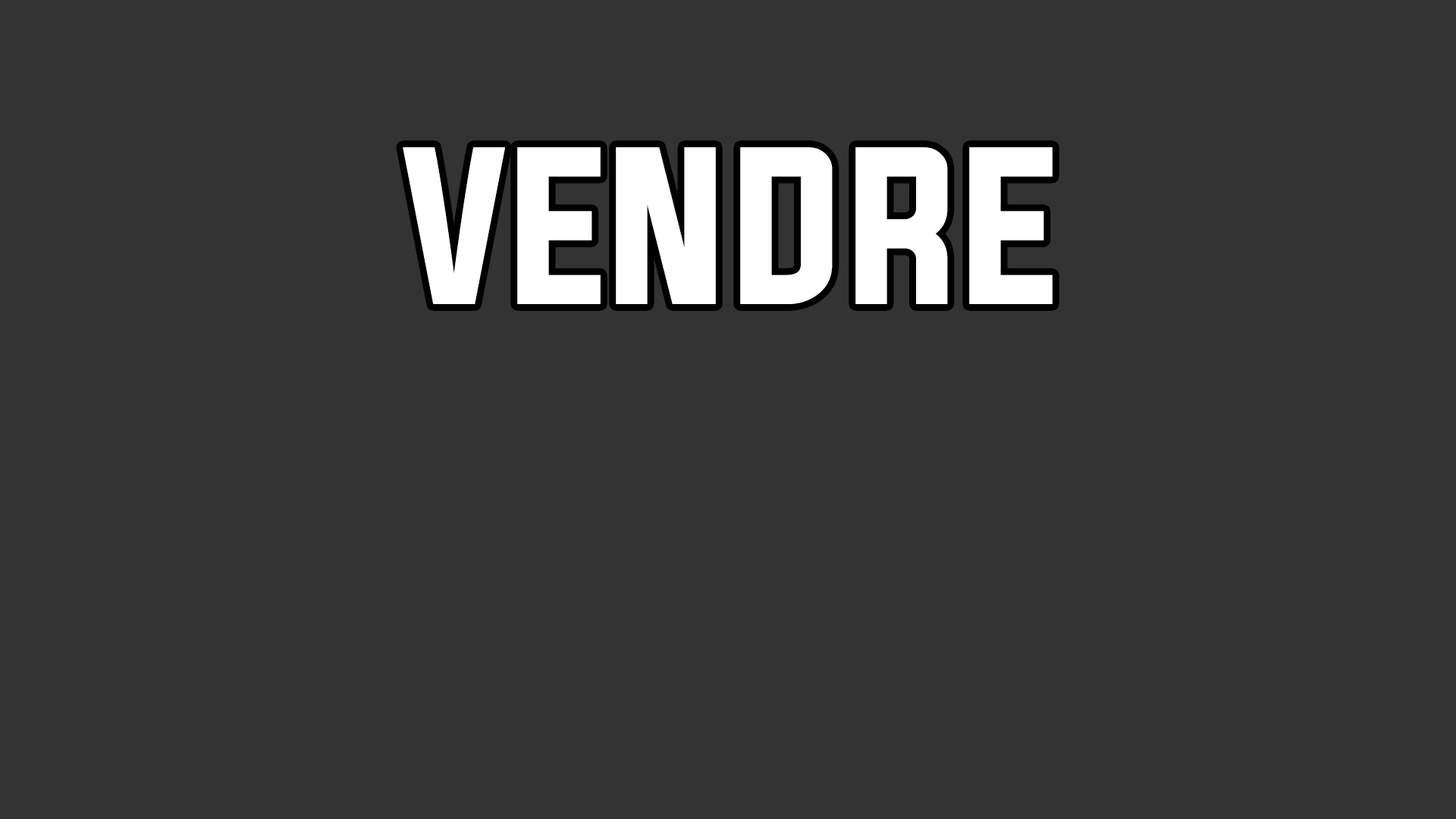
<style>
.page{position:relative;width:1456px;height:819px;background:#333333}
.page>*{position:absolute;margin:0}
.t1{font:189.6px "Evogria";color:#ffffff}
</style>
<div class="page">
<p class="t1" style="left:403px;top:147px;width:650px;height:157px">VENDRE</p>
</div>
